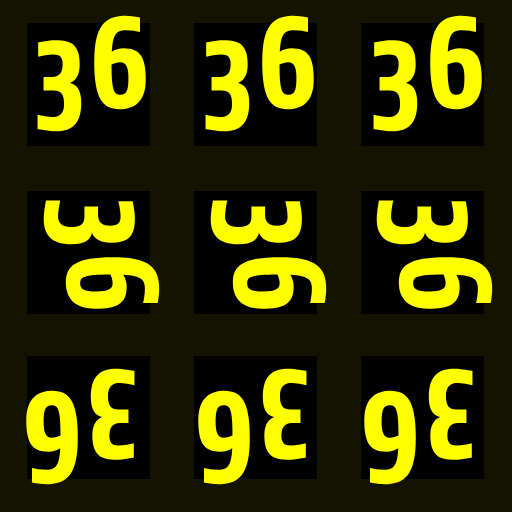
<style>
.page{position:relative;width:512px;height:512px;background:#141301}
.page>*{position:absolute;margin:0}
.t1{font:130px "Share-BoldOSF";color:#ffff00}
</style>
<div class="page">
<p class="t1" style="left:37px;top:15px;width:109px;height:117px">36</p>
<p class="t1" style="left:205px;top:15px;width:109px;height:117px">36</p>
<p class="t1" style="left:373px;top:15px;width:109px;height:117px">36</p>
<p class="t1" style="left:43px;top:200px;width:117px;height:109px;rotate:90deg">36</p>
<p class="t1" style="left:210px;top:200px;width:117px;height:109px;rotate:90deg">36</p>
<p class="t1" style="left:376px;top:200px;width:117px;height:109px;rotate:90deg">36</p>
<p class="t1" style="left:26px;top:368px;width:109px;height:117px;rotate:-180deg">36</p>
<p class="t1" style="left:198px;top:368px;width:109px;height:117px;rotate:-180deg">36</p>
<p class="t1" style="left:364px;top:368px;width:109px;height:117px;rotate:-180deg">36</p>
</div>
